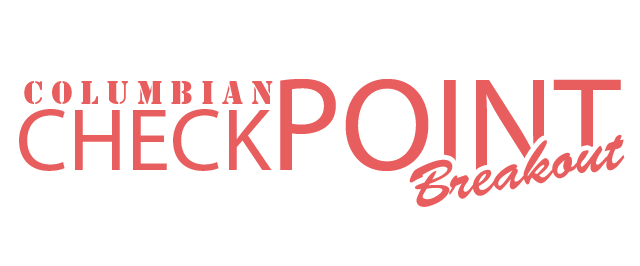
<style>
.page{position:relative;width:640px;height:266px;background:#ffffff}
.page>*{position:absolute;margin:0}
.t1{font:89.3px "MyriadPro-Regular";color:#e85d5d}
.t2{font:133.9px "MyriadPro-Regular";color:#e85d5d}
.t3{font:30px "StencilStd";letter-spacing:0.26em;color:#e85d5d}
.t4{font:61.4px "BrushScriptStd";color:#e85d5d}
</style>
<div class="page">
<p class="t1" style="left:19px;top:79px;width:602px;height:92px">CHECK<span class="t2">POINT</span></p>
<p class="t3" style="left:24px;top:81px;width:249px;height:23px">Columbian</p>
<p class="t4" style="left:409px;top:135px;width:216px;height:72px;rotate:-12deg">Breakout</p>
</div>
